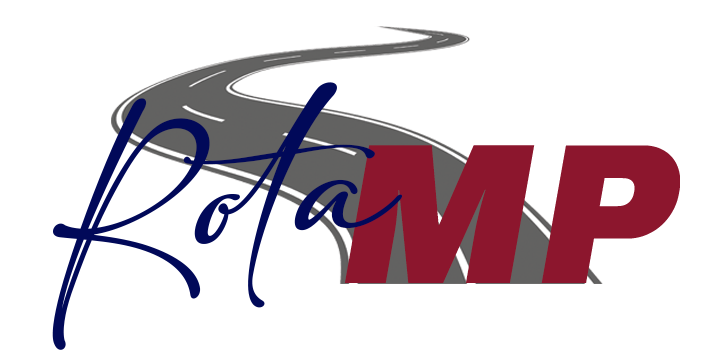
<style>
.page{position:relative;width:720px;height:360px;background:#ffffff}
.page>*{position:absolute;margin:0}
.t1{font:125px "adelia";letter-spacing:0.025em;color:#010959;font-style:italic}
.t2{font:200px "ArchivoBlack-Regular";letter-spacing:0.025em;color:#8c162d;font-style:italic}
</style>
<div class="page">
<p class="t1" style="left:52px;top:82px;width:351px;height:268px;rotate:-3deg">Rota</p>
<p class="t2" style="left:345px;top:145px;width:335px;height:138px">MP</p>
</div>
